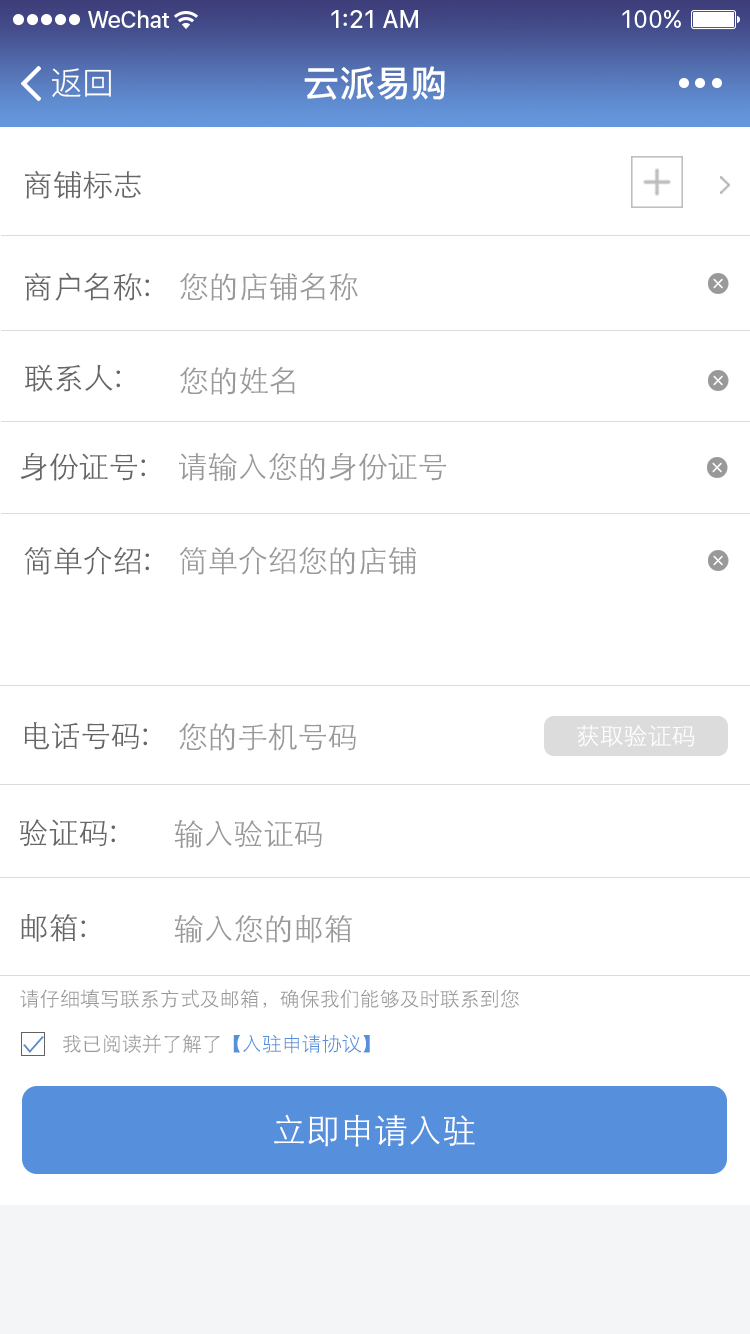
<style>
.page{position:relative;width:750px;height:1334px;background:#ffffff}
.page>*{position:absolute;margin:0}
.t1{font:32px "PingFang-SC-Regular";color:#ffffff}
.t2{font:36px "PingFang-SC-Bold";color:#ffffff}
.t3{font:30px "STXihei";color:#666666}
.t4{font:30px "STXihei";color:#999999}
.t5{font:24px "STXihei";color:#ffffff}
.t6{font:20px "STXihei";color:#999999}
.t7{font:20px "STXihei";color:#568fdc}
.t8{font:34px "STXihei";color:#ffffff}
</style>
<div class="page">
<p class="t1" style="left:52px;top:68px;width:59px;height:29px">返回</p>
<p class="t2" style="left:304px;top:66px;width:141px;height:34px">云派易购</p>
<p class="t3" style="left:25px;top:170px;width:116px;height:29px">商铺标志</p>
<p class="t3" style="left:25px;top:272px;width:124px;height:29px">商户名称:</p>
<p class="t4" style="left:180px;top:272px;width:178px;height:29px">您的店铺名称</p>
<p class="t3" style="left:24px;top:364px;width:96px;height:28px">联系人:</p>
<p class="t4" style="left:180px;top:366px;width:115px;height:29px">您的姓名</p>
<p class="t3" style="left:20px;top:452px;width:125px;height:29px">身份证号:</p>
<p class="t4" style="left:179px;top:452px;width:267px;height:29px">请输入您的身份证号</p>
<p class="t3" style="left:24px;top:546px;width:125px;height:29px">简单介绍:</p>
<p class="t4" style="left:179px;top:546px;width:237px;height:29px">简单介绍您的店铺</p>
<p class="t3" style="left:24px;top:722px;width:123px;height:28px">电话号码:</p>
<p class="t4" style="left:179px;top:722px;width:177px;height:29px">您的手机号码</p>
<p class="t5" style="left:577px;top:725px;width:118px;height:22px">获取验证码</p>
<p class="t3" style="left:19px;top:819px;width:96px;height:28px">验证码:</p>
<p class="t4" style="left:174px;top:819px;width:148px;height:29px">输入验证码</p>
<p class="t3" style="left:21px;top:914px;width:64px;height:28px">邮箱:</p>
<p class="t4" style="left:174px;top:914px;width:178px;height:29px">输入您的邮箱</p>
<p class="t6" style="left:20px;top:989px;width:499px;height:19px">请仔细填写联系方式及邮箱，确保我们能够及时联系到您</p>
<p class="t6" style="left:63px;top:1034px;width:307px;height:19px">我已阅读并了解了<span class="t7">【入驻申请协议】</span></p>
<p class="t8" style="left:274px;top:1114px;width:201px;height:33px">立即申请入驻</p>
</div>
